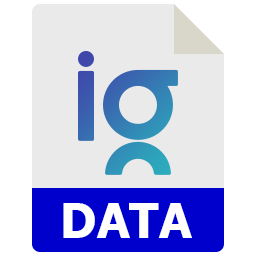
<style>
.page{position:relative;width:256px;height:256px;background:#eaeaea}
.page>*{position:absolute;margin:0}
.t1{font:48px "Tahoma-Bold";color:#ffffff}
</style>
<div class="page">
<p class="t1" style="left:63px;top:203px;width:129px;height:35px">DATA</p>
</div>
